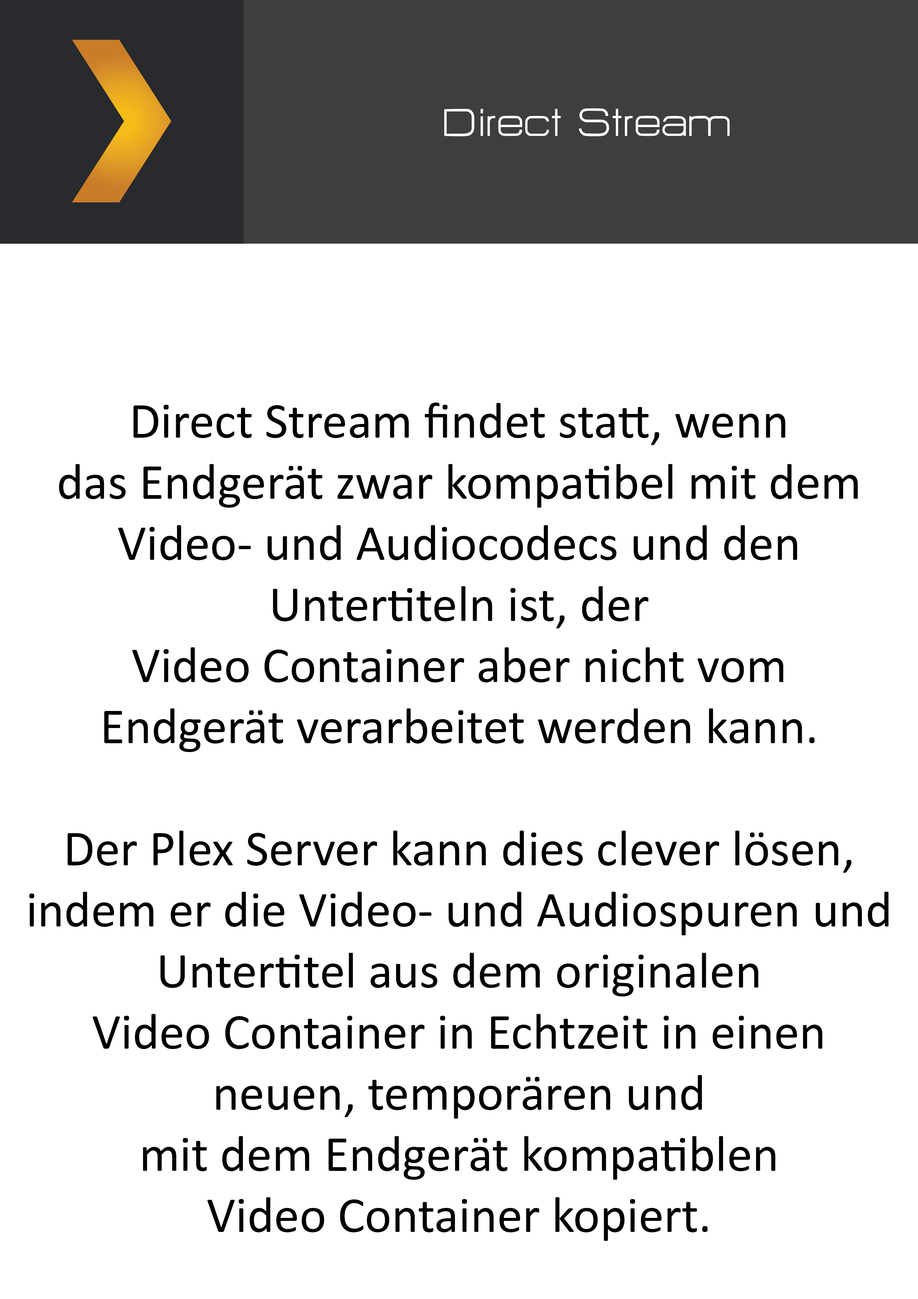
<style>
.page{position:relative;width:918px;height:1299px;background:#ffffff}
.page>*{position:absolute;margin:0}
.t1{font:47.8px "HURTMOLDPersonalUse-Regular";color:#ffffff}
.t2{font:50.9px "Calibri";color:#000000}
</style>
<div class="page">
<p class="t1" style="left:444px;top:108px;width:286px;height:28px">Direct Stream</p>
<p class="t2" style="left:29px;top:402px;width:860px;height:839px;text-align:center">Direct Stream findet statt, wenn<br>das Endgerät zwar kompatibel mit dem<br>Video- und Audiocodecs und den<br>Untertiteln ist, der<br>Video Container aber nicht vom<br>Endgerät verarbeitet werden kann.<br><br>Der Plex Server kann dies clever lösen,<br>indem er die Video- und Audiospuren und<br>Untertitel aus dem originalen<br>Video Container in Echtzeit in einen<br>neuen, temporären und<br>mit dem Endgerät kompatiblen<br>Video Container kopiert.</p>
</div>
